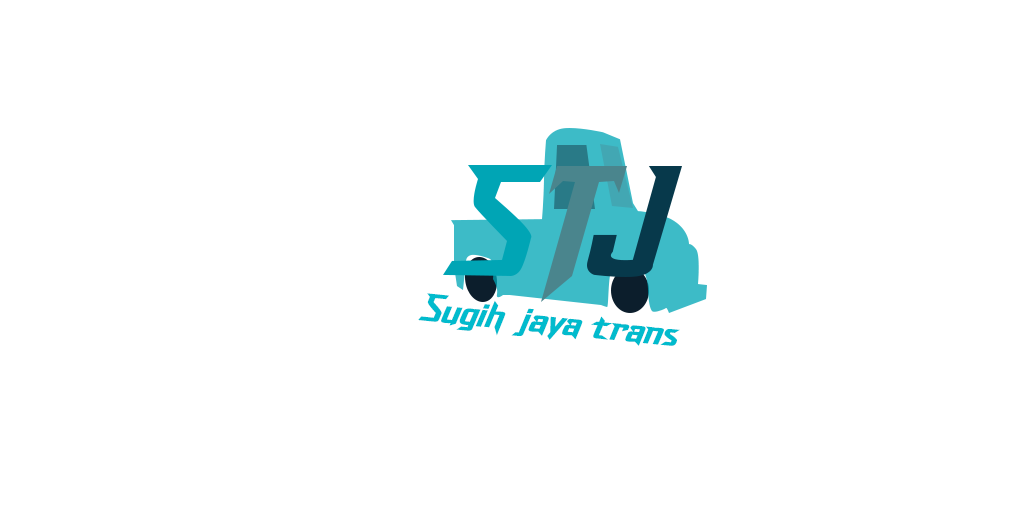
<style>
.page{position:relative;width:1024px;height:512px;background:#ffffff}
.page>*{position:absolute;margin:0}
.t1{font:38.8px "DashHorizon";color:#01bbcd;scale:1.16 1}
</style>
<div class="page">
<p class="t1" style="left:418px;top:293px;width:262px;height:53px;rotate:6deg">Sugih jaya trans</p>
</div>
